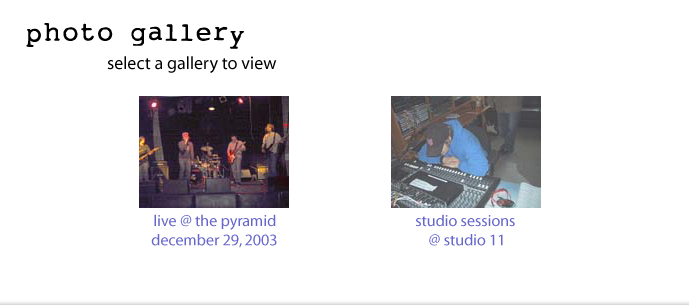
<style>
.page{position:relative;width:689px;height:305px;background:#ffffff}
.page>*{position:absolute;margin:0}
.t1{font:26px "My-type-of-font";color:#000000;font-weight:bold}
.t2{font:18px "Myriad-Roman";color:#000000}
.t3{font:16px "Myriad-Roman";color:#6766cc}
</style>
<div class="page">
<p class="t1" style="left:26px;top:23px;width:218px;height:26px">photo gallery</p>
<p class="t2" style="left:107px;top:56px;width:170px;height:17px">select a gallery to view</p>
<p class="t3" style="left:151px;top:214px;width:126px;height:34px;text-align:center">live @ the pyramid<br>december 29, 2003</p>
<p class="t3" style="left:415px;top:214px;width:100px;height:32px;text-align:center">studio sessions <br>@ studio 11</p>
</div>
